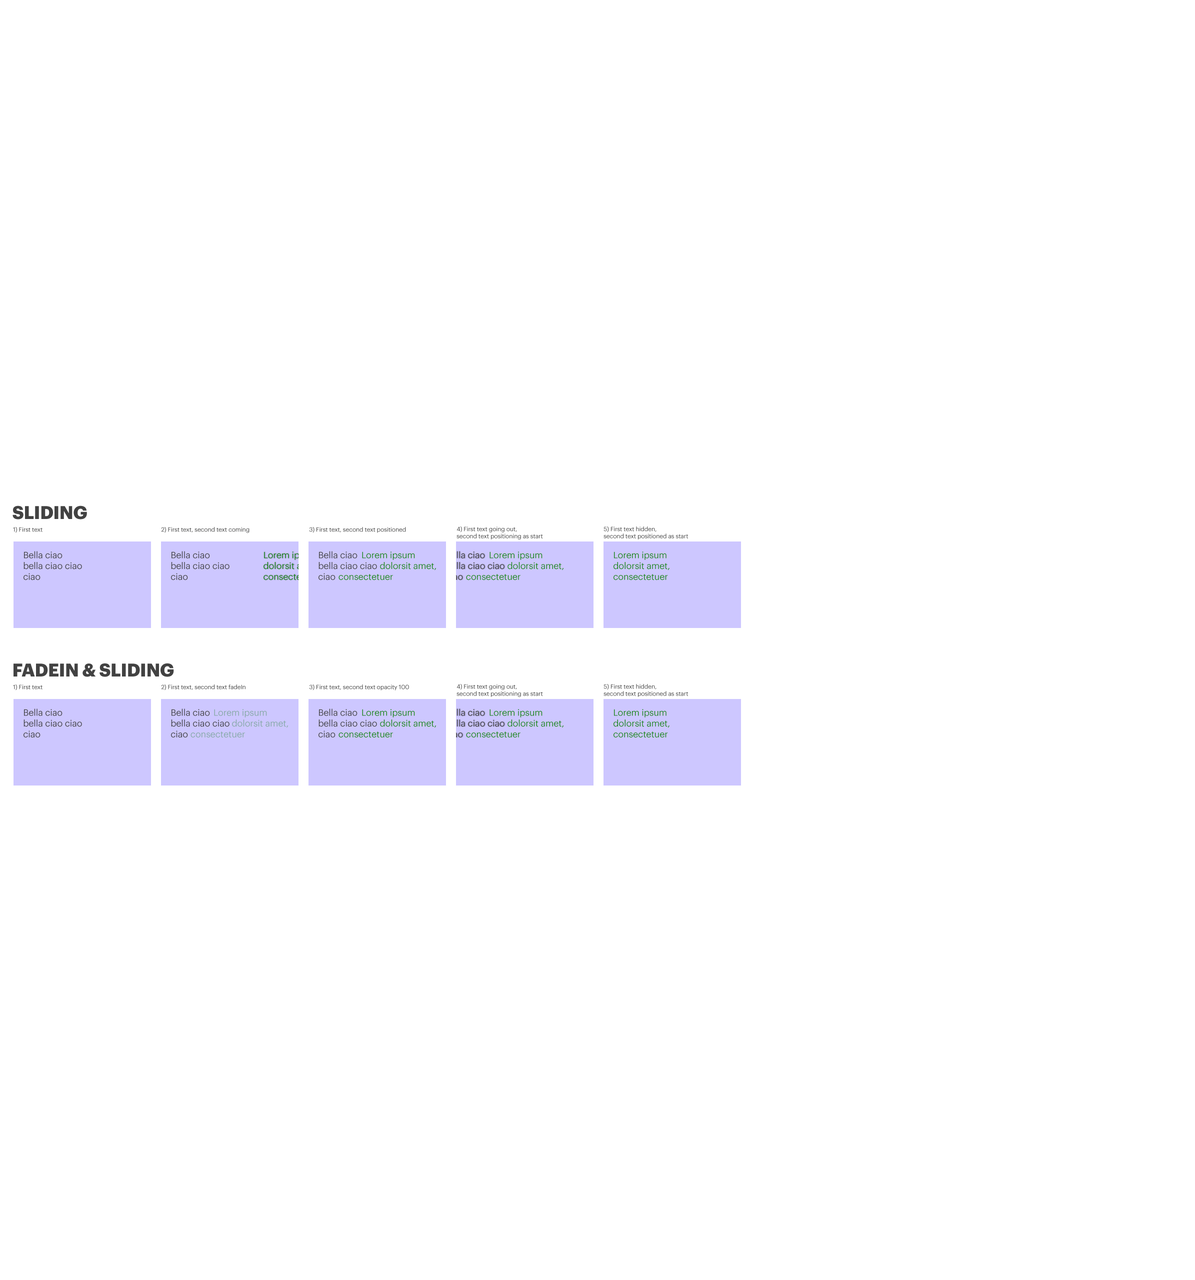
<style>
.page{position:relative;width:1195px;height:1280px;background:#ffffff}
.page>*{position:absolute;margin:0}
.t1{font:18px "Graphik-Bold";letter-spacing:-0.01em;color:#424242}
.t2{font:6px "Graphik-Regular";letter-spacing:-0.01em;color:#424242}
.t3{font:9px "Graphik-Regular";letter-spacing:-0.01em;color:#424242}
.t4{font:9px "Graphik-Regular";letter-spacing:-0.01em;color:#168811}
.t5{font:9px "Graphik-Regular";letter-spacing:-0.01em;color:#88aaa8}
</style>
<div class="page">
<p class="t1" style="left:12px;top:506px;width:75px;height:14px">SLIDING</p>
<p class="t2" style="left:13px;top:527px;width:29px;height:6px">1) First text</p>
<p class="t2" style="left:161px;top:527px;width:89px;height:6px">2) First text, second text coming</p>
<p class="t2" style="left:309px;top:527px;width:97px;height:6px">3) First text, second text positioned</p>
<p class="t2" style="left:456px;top:526px;width:87px;height:14px">4) First text going out,<br>second text positioning as start</p>
<p class="t2" style="left:604px;top:526px;width:84px;height:14px">5) First text hidden,<br>second text positioned as start</p>
<p class="t3" style="left:24px;top:551px;width:58px;height:29px">Bella ciao<br>bella ciao ciao<br>ciao</p>
<p class="t3" style="left:171px;top:551px;width:59px;height:29px">Bella ciao<br>bella ciao ciao<br>ciao</p>
<p class="t4" style="left:264px;top:552px;width:56px;height:28px">Lorem ipsum <br>dolorsit amet,<br>consectetuer</p>
<p class="t3" style="left:318px;top:551px;width:59px;height:29px">Bella ciao<br>bella ciao ciao<br>ciao</p>
<p class="t4" style="left:338px;top:552px;width:98px;height:28px">Lorem ipsum <br>                   dolorsit amet,<br> consectetuer</p>
<p class="t3" style="left:446px;top:551px;width:58px;height:29px">Bella ciao<br>bella ciao ciao<br>ciao</p>
<p class="t4" style="left:466px;top:552px;width:98px;height:28px">Lorem ipsum <br>                   dolorsit amet,<br> consectetuer</p>
<p class="t4" style="left:614px;top:552px;width:56px;height:28px">Lorem ipsum <br>dolorsit amet,<br>consectetuer</p>
<p class="t1" style="left:14px;top:663px;width:160px;height:14px">FADEIN &amp; SLIDING</p>
<p class="t2" style="left:13px;top:684px;width:29px;height:6px">1) First text</p>
<p class="t2" style="left:161px;top:684px;width:85px;height:6px">2) First text, second text fadeIn</p>
<p class="t2" style="left:309px;top:684px;width:100px;height:6px">3) First text, second text opacity 100</p>
<p class="t2" style="left:456px;top:684px;width:87px;height:13px">4) First text going out,<br>second text positioning as start</p>
<p class="t2" style="left:604px;top:684px;width:84px;height:13px">5) First text hidden,<br>second text positioned as start</p>
<p class="t3" style="left:24px;top:708px;width:58px;height:30px">Bella ciao<br>bella ciao ciao<br>ciao</p>
<p class="t3" style="left:171px;top:708px;width:59px;height:30px">Bella ciao<br>bella ciao ciao<br>ciao</p>
<p class="t5" style="left:190px;top:709px;width:98px;height:29px">Lorem ipsum <br>                   dolorsit amet,<br> consectetuer</p>
<p class="t3" style="left:318px;top:708px;width:59px;height:30px">Bella ciao<br>bella ciao ciao<br>ciao</p>
<p class="t4" style="left:338px;top:709px;width:98px;height:29px">Lorem ipsum <br>                   dolorsit amet,<br> consectetuer</p>
<p class="t3" style="left:446px;top:708px;width:58px;height:30px">Bella ciao<br>bella ciao ciao<br>ciao</p>
<p class="t4" style="left:466px;top:709px;width:98px;height:29px">Lorem ipsum <br>                   dolorsit amet,<br> consectetuer</p>
<p class="t4" style="left:614px;top:709px;width:56px;height:29px">Lorem ipsum <br>dolorsit amet,<br>consectetuer</p>
</div>
